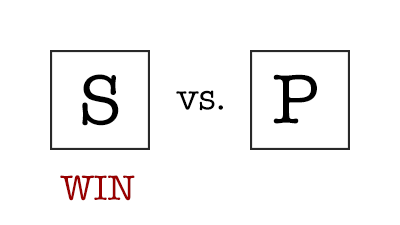
<style>
.page{position:relative;width:400px;height:225px;background:#ffffff}
.page>*{position:absolute;margin:0}
.t1{font:71.6px "AmericanTypewriter";color:#000000}
.t2{font:72.2px "AmericanTypewriter";color:#000000}
.t3{font:36px "AmericanTypewriter";color:#000000}
.t4{font:36px "AmericanTypewriter";color:#990000}
</style>
<div class="page">
<p class="t1" style="left:82px;top:74px;width:37px;height:52px">S</p>
<p class="t2" style="left:273px;top:74px;width:44px;height:50px">P</p>
<p class="t3" style="left:176px;top:90px;width:47px;height:21px">vs.</p>
<p class="t4" style="left:60px;top:175px;width:75px;height:26px">WIN</p>
</div>
